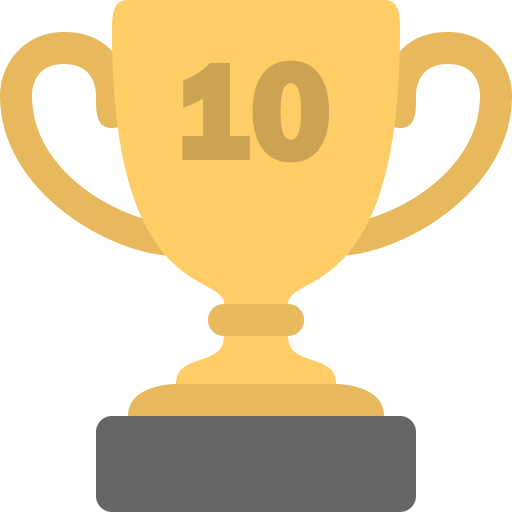
<style>
.page{position:relative;width:512px;height:512px;background:#ffffff}
.page>*{position:absolute;margin:0}
.t1{font:148.2px "Sen-ExtraBold";letter-spacing:-0.075em;color:#cca352}
</style>
<div class="page">
<p class="t1" style="left:182px;top:60px;width:147px;height:103px">10</p>
</div>
